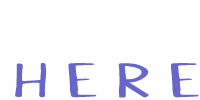
<style>
.page{position:relative;width:200px;height:100px;background:#ffffff}
.page>*{position:absolute;margin:0}
.t1{font:45.8px "MeaCulpa-Regular";color:#6666cc;scale:1.86 1}
</style>
<div class="page">
<p class="t1" style="left:15px;top:63px;width:184px;height:35px">here</p>
</div>
